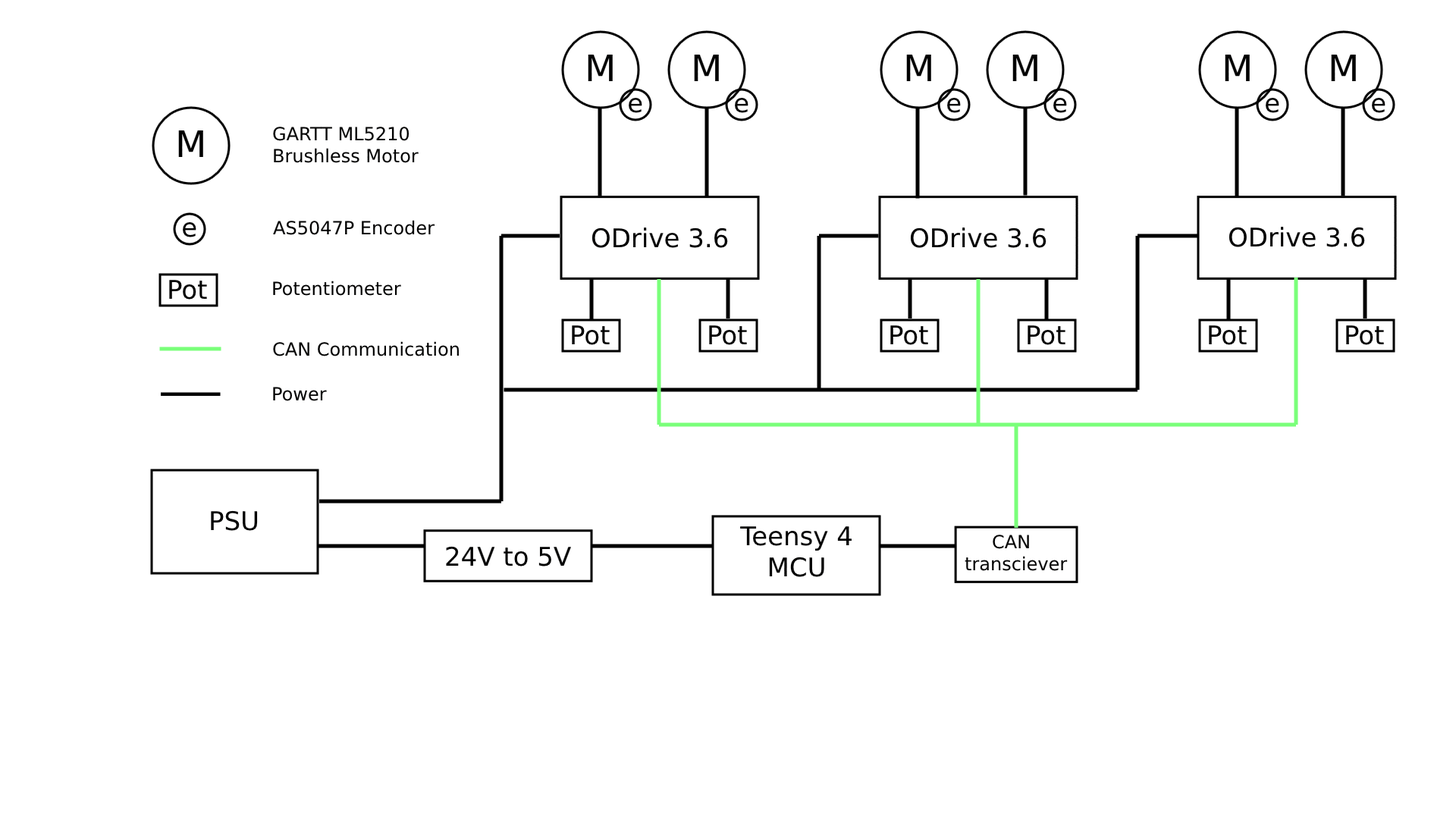
<style>
.page{position:relative;width:1456px;height:819px;background:#ffffff}
.page>*{position:absolute;margin:0}
.t1{font:18.2px "DejaVuSans";color:#000000}
.t2{font:25.8px "DejaVuSans";color:#000000}
</style>
<div class="page">
<p class="t1" style="left:273px;top:127px;width:146px;height:36px">GARTT ML5210<br>Brushless Motor</p>
<p class="t1" style="left:273px;top:220px;width:162px;height:15px">AS5047P Encoder</p>
<p class="t2" style="left:591px;top:227px;width:137px;height:21px">ODrive 3.6</p>
<p class="t2" style="left:910px;top:227px;width:136px;height:21px">ODrive 3.6</p>
<p class="t2" style="left:1228px;top:227px;width:137px;height:20px">ODrive 3.6</p>
<p class="t1" style="left:273px;top:281px;width:128px;height:15px">Potentiometer</p>
<p class="t1" style="left:273px;top:341px;width:186px;height:15px">CAN Communication</p>
<p class="t1" style="left:273px;top:387px;width:54px;height:14px">Power</p>
<p class="t2" style="left:211px;top:510px;width:47px;height:21px">PSU</p>
<p class="t2" style="left:740px;top:526px;width:112px;height:51px;text-align:center">Teensy 4 MCU</p>
<p class="t2" style="left:446px;top:546px;width:125px;height:20px">24V to 5V</p>
<p class="t1" style="left:965px;top:535px;width:103px;height:36px;text-align:center">CAN transciever</p>
</div>
